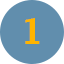
<style>
.page{position:relative;width:64px;height:64px;background:#618ead}
.page>*{position:absolute;margin:0}
.t1{font:36px "LucidaFax-Demi";color:#ffb400}
</style>
<div class="page">
<p class="t1" style="left:25px;top:18px;width:15px;height:26px">1</p>
</div>
